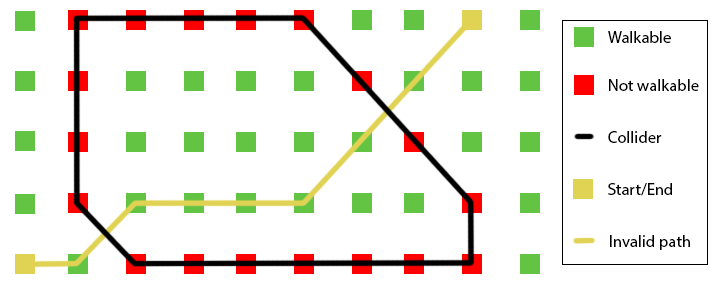
<style>
.page{position:relative;width:725px;height:286px;background:#ffffff}
.page>*{position:absolute;margin:0}
.t1{font:16.7px "MyriadPro-Regular";color:#000000}
</style>
<div class="page">
<p class="t1" style="left:608px;top:31px;width:63px;height:12px">Walkable</p>
<p class="t1" style="left:609px;top:79px;width:90px;height:12px">Not walkable</p>
<p class="t1" style="left:608px;top:131px;width:54px;height:12px">Collider</p>
<p class="t1" style="left:608px;top:183px;width:64px;height:13px">Start/End</p>
<p class="t1" style="left:610px;top:235px;width:80px;height:15px">Invalid path</p>
</div>
